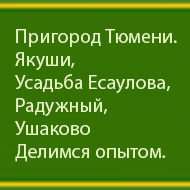
<style>
.page{position:relative;width:190px;height:190px}
.page>*{position:absolute;margin:0}
.t1{font:20px/23px "MyriadPro-Regular";color:#e8f5c4}
</style>
<div class="page">
<p class="t1" style="left:15px;top:29px;width:162px;height:133px">Пригород Тюмени.<br>Якуши, <br>Усадьба Есаулова, <br>Радужный, <br>Ушаково<br>Делимся опытом.</p>
</div>
